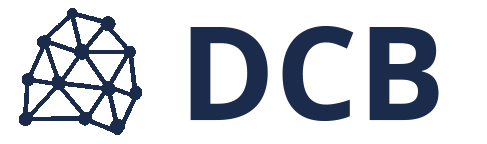
<style>
.page{position:relative;width:487px;height:144px;background:#ffffff}
.page>*{position:absolute;margin:0}
.t1{font:130px "NotoSans-Bold";color:#1b2b4b}
</style>
<div class="page">
<p class="t1" style="left:190px;top:26px;width:249px;height:95px">DCB</p>
</div>
